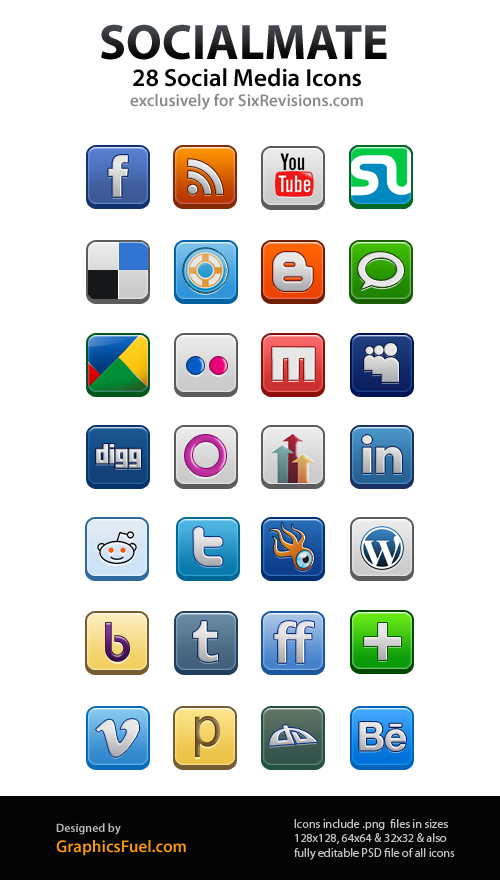
<style>
.page{position:relative;width:500px;height:880px;background:#ffffff}
.page>*{position:absolute;margin:0}
.t1{font:50px "MyriadPro-Bold";text-transform:uppercase}
.t2{font:17px "MyriadPro-Semibold";color:#8a8a8a}
.t3{font:25px "MyriadPro-Semibold";color:#040404}
.t4{font:12px "MyriadPro-Regular";color:#c0c0c0}
.t5{font:17px "MyriadPro-Semibold";color:#fc9a00}
.t6{font:12px "MyriadPro-Semibold";color:#c0c0c0}
</style>
<div class="page">
<p class="t1" style="left:101px;top:24px;width:286px;height:36px">socialmate</p>
<p class="t2" style="left:130px;top:68px;width:233px;height:42px;text-align:center"><span class="t3">28 Social Media Icons<br></span>exclusively for SixRevisions.com</p>
<p class="t4" style="left:294px;top:819px;width:161px;height:41px">Icons include .png  files in sizes<br>128x128, 64x64 &amp; 32x32 &amp; also<br>fully editable PSD file of all icons</p>
<p class="t5" style="left:56px;top:823px;width:130px;height:33px"><span class="t6">Designed by <br></span>GraphicsFuel.com</p>
</div>
